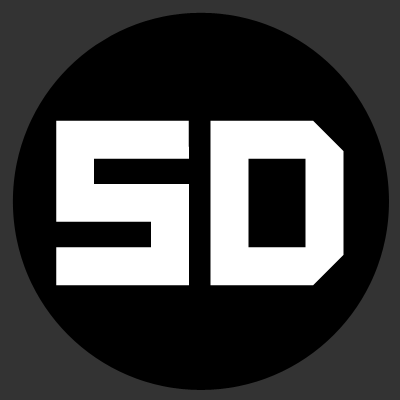
<style>
.page{position:relative;width:400px;height:400px;background:#000000}
.page>*{position:absolute;margin:0}
.t1{font:223.1px "Kremlin";color:#ffffff}
</style>
<div class="page">
<p class="t1" style="left:56px;top:120px;width:288px;height:166px">SD</p>
</div>
